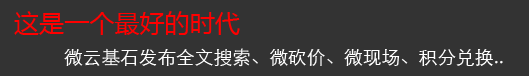
<style>
.page{position:relative;width:529px;height:76px;background:#333333}
.page>*{position:absolute;margin:0}
.t1{font:25.1px "MicrosoftYaHei";color:#ff0000}
.t2{font:18.7px "STXihei";color:#ffffff}
</style>
<div class="page">
<p class="t1" style="left:14px;top:11px;width:226px;height:24px">这是一个最好的时代</p>
<p class="t2" style="left:64px;top:48px;width:439px;height:19px">微云基石发布全文搜索、微砍价、微现场、积分兑换..</p>
</div>
